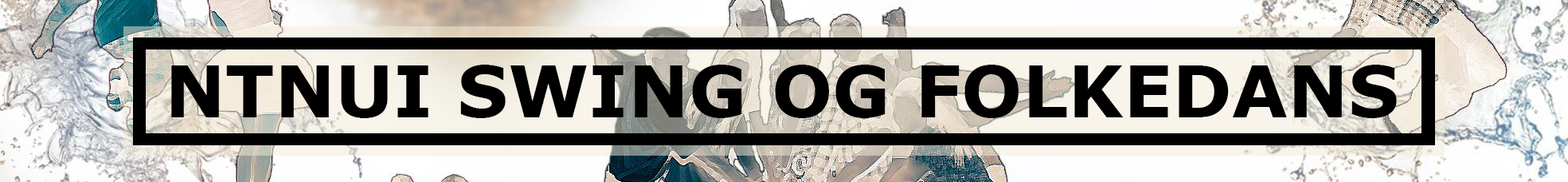
<style>
.page{position:relative;width:1568px;height:182px}
.page>*{position:absolute;margin:0}
.t1{font:71.7px "Verdana-Bold";color:#000000}
</style>
<div class="page">
<p class="t1" style="left:171px;top:65px;width:1226px;height:53px">NTNUI SWING OG FOLKEDANS</p>
</div>
